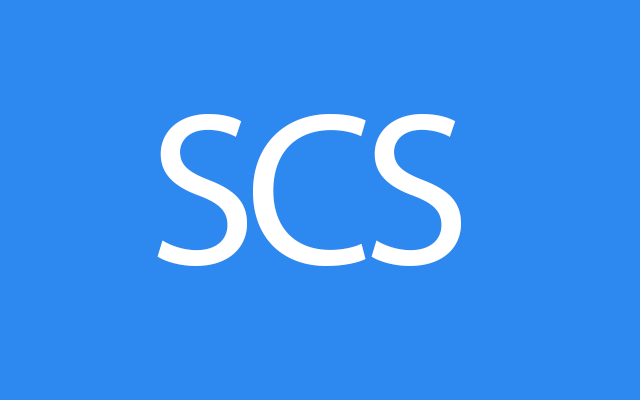
<style>
.page{position:relative;width:640px;height:400px;background:#2d89ef}
.page>*{position:absolute;margin:0}
.t1{font:220px "MyriadPro-Regular";letter-spacing:-0.05em;color:#ffffff}
</style>
<div class="page">
<p class="t1" style="left:157px;top:114px;width:304px;height:152px">SCS</p>
</div>
